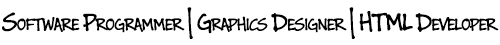
<style>
.page{position:relative;width:500px;height:45px;background:#ffffff}
.page>*{position:absolute;margin:0}
.t1{font:48px "BuxtonSketch";letter-spacing:-0.05em;color:#000000;font-variant:small-caps}
</style>
<div class="page">
<p class="t1" style="left:2px;top:7px;width:497px;height:32px">Software Programmer | Graphics Designer | HTML Developer</p>
</div>
